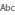
<style>
.page{position:relative;width:15px;height:15px;background:#ffffff}
.page>*{position:absolute;margin:0}
.t1{font:9.1px "MyriadPro-Regular";color:#707070}
</style>
<div class="page">
<p class="t1" style="left:0px;top:4px;width:15px;height:7px">Abc</p>
</div>
